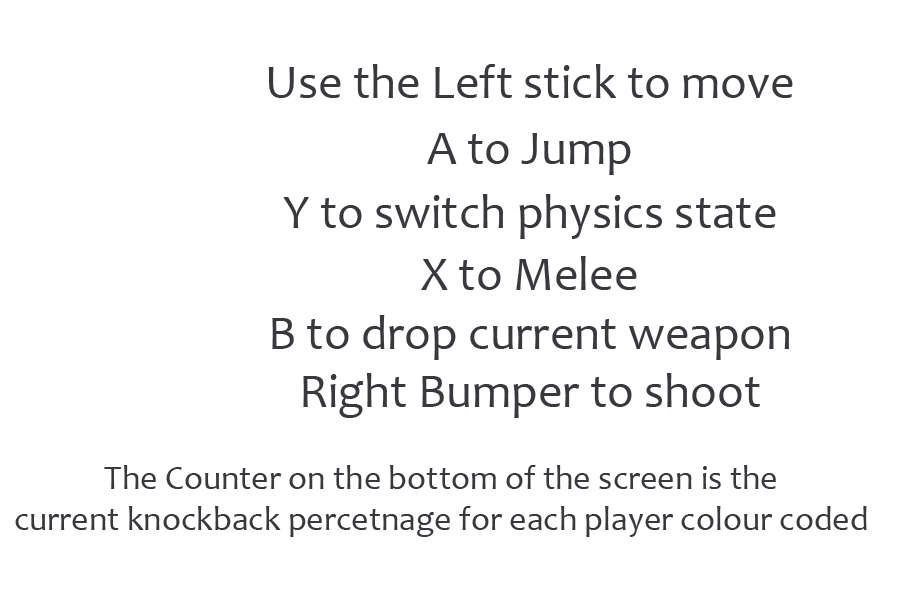
<style>
.page{position:relative;width:900px;height:600px;background:#ffffff}
.page>*{position:absolute;margin:0}
.t1{font:48px "Candara";color:#37393d}
.t2{font:34px "Candara";color:#37393d}
</style>
<div class="page">
<p class="t1" style="left:268px;top:64px;width:525px;height:34px">Use the Left stick to move</p>
<p class="t1" style="left:427px;top:133px;width:204px;height:42px">A to Jump</p>
<p class="t1" style="left:283px;top:194px;width:493px;height:45px">Y to switch physics state</p>
<p class="t1" style="left:421px;top:256px;width:216px;height:34px">X to Melee</p>
<p class="t1" style="left:272px;top:315px;width:517px;height:103px;text-align:center">B to drop current weapon<br>Right Bumper to shoot</p>
<p class="t2" style="left:15px;top:465px;width:852px;height:72px;text-align:center">The Counter on the bottom of the screen is the<br>current knockback percetnage for each player colour coded</p>
</div>
